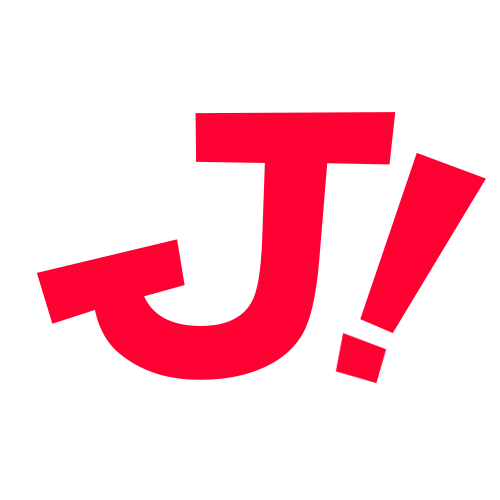
<style>
.page{position:relative;width:500px;height:500px;background:#ffffff}
.page>*{position:absolute;margin:0}
.t1{font:326px "Yahoo";color:#fe0032}
</style>
<div class="page">
<p class="t1" style="left:36px;top:112px;width:360px;height:268px;rotate:2deg">J</p>
</div>
